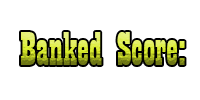
<style>
.page{position:relative;width:200px;height:100px;background:#ffffff}
.page>*{position:absolute;margin:0}
.t1{font:12px "Playbill"}
</style>
<div class="page">
<p class="t1" style="left:21px;top:32px;width:164px;height:33px">Banked Score:</p>
</div>
